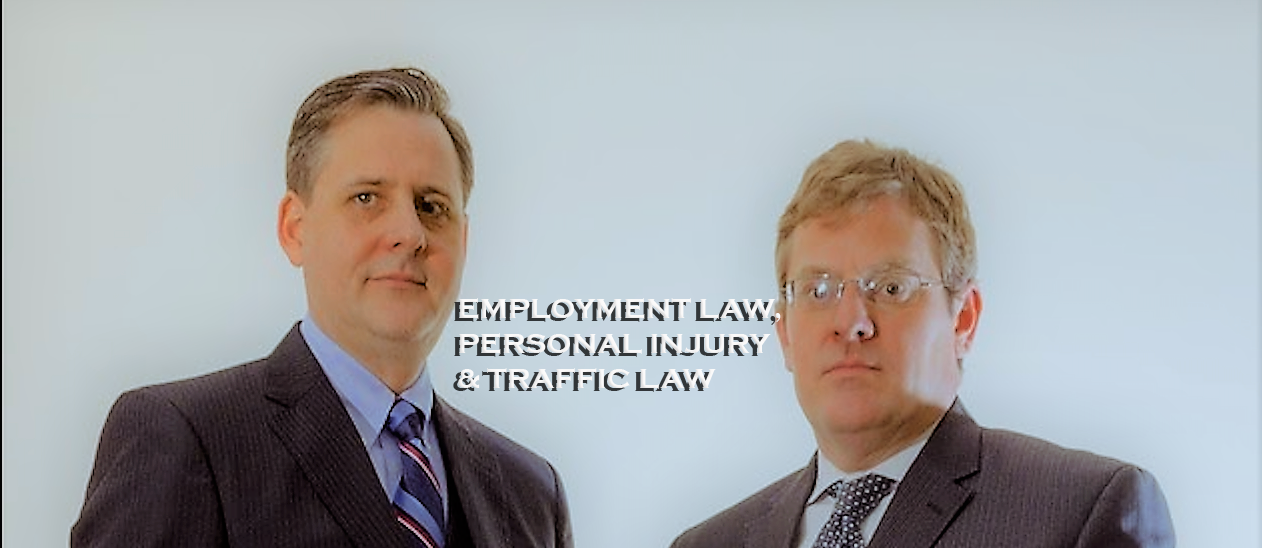
<style>
.page{position:relative;width:1262px;height:548px}
.page>*{position:absolute;margin:0}
.t1{font:29.3px "CopperplateGothic-Bold";color:#f8f7f7}
</style>
<div class="page">
<p class="t1" style="left:458px;top:298px;width:323px;height:91px">EMPLOYMENT LAW,<br>PERSONAL INJURY<br>&amp; TRAFFIC LAW</p>
</div>
